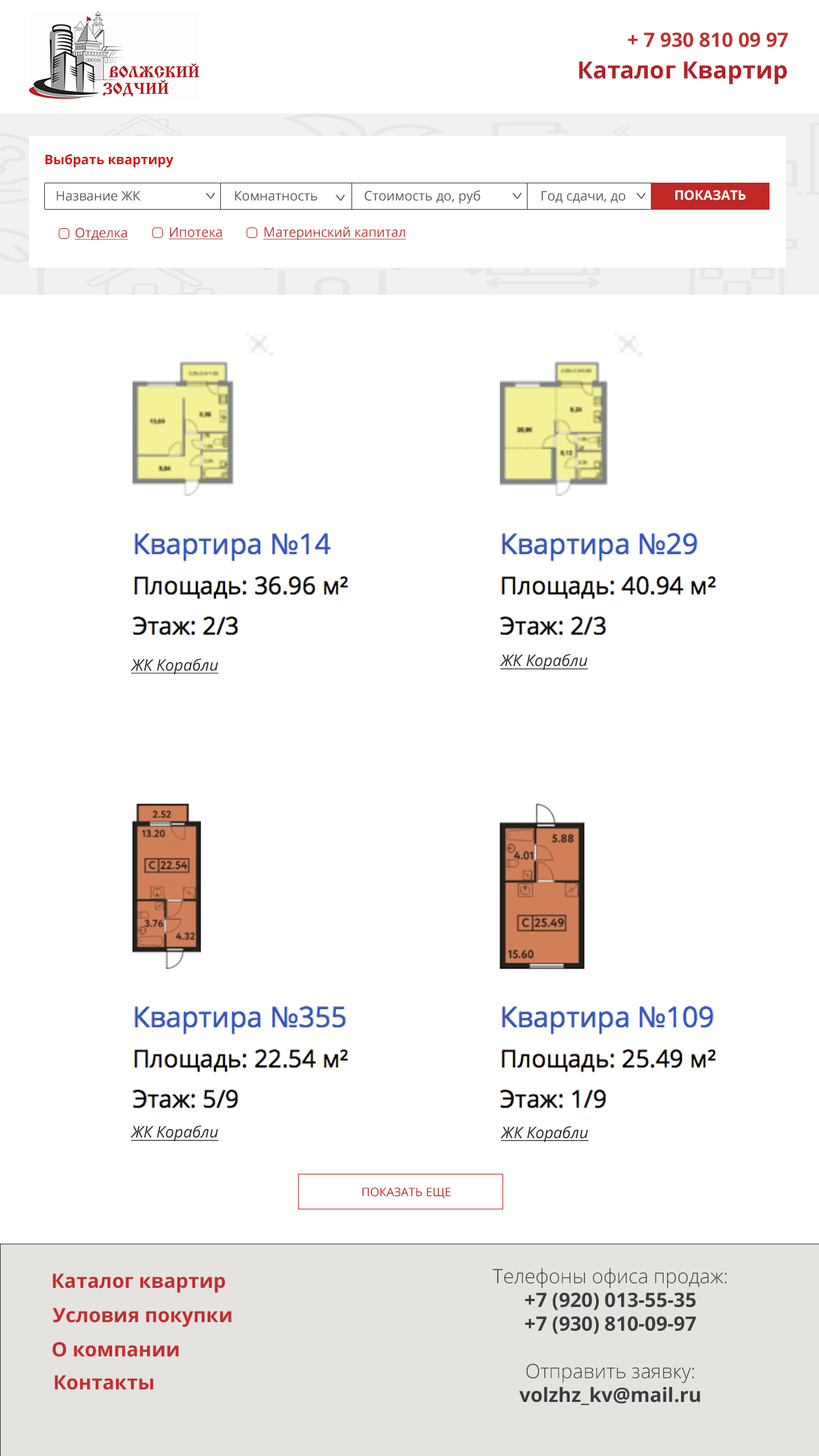
<style>
.page{position:relative;width:819px;height:1456px;background:#ffffff}
.page>*{position:absolute;margin:0}
.t1{font:19.8px "OpenSans-Bold";color:#c42d2d}
.t2{font:23.7px "OpenSans-Bold";color:#b32227}
.t3{font:15.8px "OpenSans-Italic";color:#262525;text-decoration:underline}
.t4{font:11.9px "OpenSans";color:#b9201e}
.t5{font:19.8px/23.7px "OpenSans-Bold";color:#3b3b3b}
.t6{font:19.8px/23.7px "OpenSans-Light";color:#3b3b3b}
</style>
<div class="page">
<p class="t1" style="left:628px;top:32px;width:160px;height:15px">+ 7 930 810 09 97</p>
<p class="t2" style="left:579px;top:61px;width:208px;height:23px">Каталог Квартир</p>
<p class="t3" style="left:500px;top:653px;width:88px;height:17px">ЖК Корабли</p>
<p class="t3" style="left:131px;top:658px;width:88px;height:17px">ЖК Корабли</p>
<p class="t3" style="left:131px;top:1125px;width:88px;height:16px">ЖК Корабли</p>
<p class="t3" style="left:500px;top:1126px;width:89px;height:16px">ЖК Корабли</p>
<p class="t4" style="left:362px;top:1188px;width:89px;height:11px">ПОКАЗАТЬ ЕЩЕ</p>
<p class="t1" style="left:53px;top:1273px;width:173px;height:20px">Каталог квартир</p>
<p class="t5" style="left:493px;top:1268px;width:234px;height:137px;text-align:center"><span class="t6">Телефоны офиса продаж:<br></span>+7 (920) 013-55-35 <br>+7 (930) 810-09-97<br><br><span class="t6">Отправить заявку:<br></span>volzhz_kv@mail.ru</p>
<p class="t1" style="left:53px;top:1308px;width:178px;height:19px">Условия покупки</p>
<p class="t1" style="left:52px;top:1342px;width:127px;height:15px">О компании</p>
<p class="t1" style="left:55px;top:1375px;width:99px;height:15px">Контакты</p>
</div>
